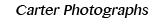
<style>
.page{position:relative;width:162px;height:21px;background:#ffffff}
.page>*{position:absolute;margin:0}
.t1{font:16px "KannadaMN";color:#000000;font-style:italic}
</style>
<div class="page">
<p class="t1" style="left:16px;top:4px;width:133px;height:14px">Carter Photographs</p>
</div>
